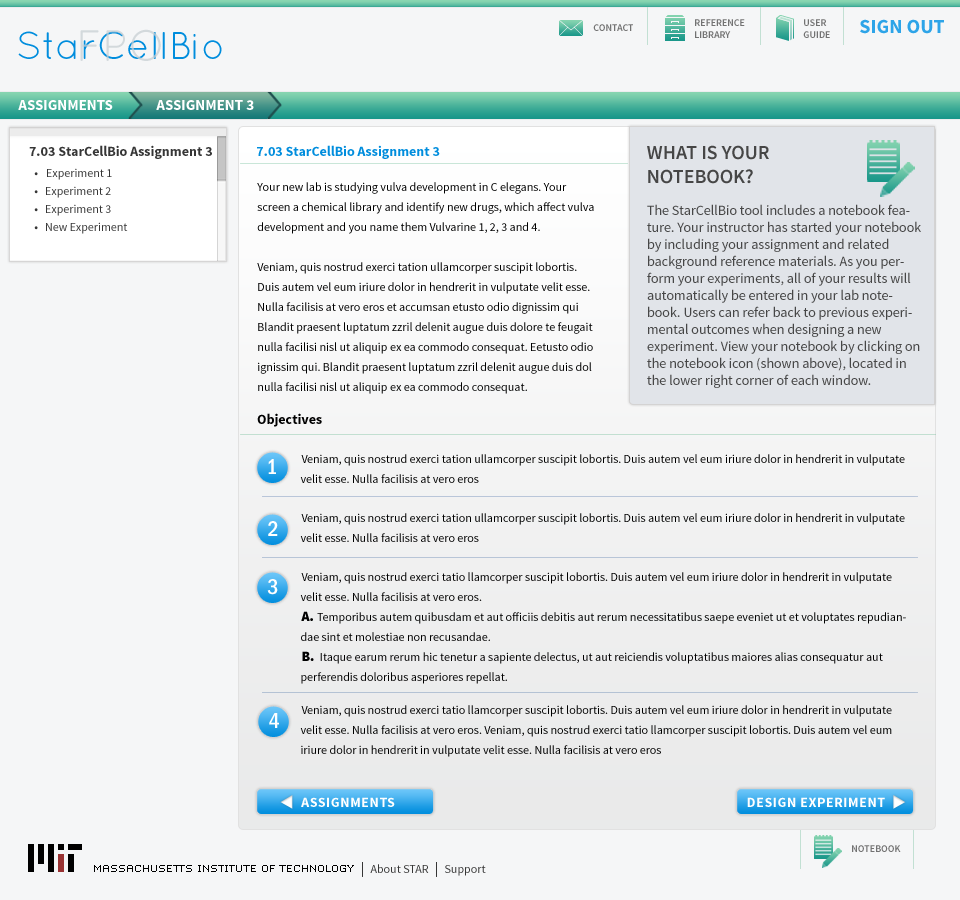
<style>
.page{position:relative;width:960px;height:900px;background:#f5f6f7}
.page>*{position:absolute;margin:0}
.t1{font:43.9px "QuicksandBook-Regular";color:#c7cfd3}
.t2{font:10px "SourceSansPro-Semibold";color:#727272}
.t3{font:20px "SourceSansPro-Bold";color:#2da4e8}
.t4{font:38.5px "QuicksandBook-Regular";color:#008ddd}
.t5{font:15px "SourceSansPro-Bold";color:#ffffff}
.t6{font:14px "SourceSansPro-Bold";color:#363636}
.t7{font:14px "SourceSansPro-Bold";color:#008ddd}
.t8{font:14px "SourceSansPro-Bold";color:#008ddd;text-transform:uppercase}
.t9{font:20px "SourceSansPro-Semibold";color:#464646}
.t10{font:12px/18px "SourceSansPro-Regular";color:#363636}
.t11{font:12px/20px "SourceSansPro-Regular";color:#000000}
.t12{font:14px/17px "SourceSansPro-Regular";color:#464646}
.t13{font:14px "SourceSansPro-Bold";color:#000000}
.t14{font:21.9px "ITCFranklinGothicStd-MdCd";color:#ffffff}
.t15{font:14px/20px "SourceSansPro-Black";color:#000000}
.t16{font:14px "SourceSansPro-Bold";letter-spacing:0.04em;color:#ffffff}
.t17{font:12px "SourceSansPro-Regular";color:#363636}
</style>
<div class="page">
<p class="t1" style="left:80px;top:29px;width:81px;height:32px;opacity:0.75">FPO</p>
<p class="t2" style="left:593px;top:24px;width:40px;height:7px">CONTACT</p>
<p class="t2" style="left:695px;top:19px;width:50px;height:19px">REFERENCE<br>LIBRARY</p>
<p class="t2" style="left:803px;top:19px;width:27px;height:19px">USER<br>GUIDE</p>
<p class="t3" style="left:860px;top:19px;width:84px;height:15px">SIGN OUT</p>
<p class="t4" style="left:18px;top:31px;width:204px;height:28px">StarCellBio</p>
<p class="t5" style="left:18px;top:100px;width:95px;height:10px">ASSIGNMENTS</p>
<p class="t5" style="left:156px;top:100px;width:98px;height:10px">ASSIGNMENT 3</p>
<p class="t6" style="left:29px;top:145px;width:183px;height:14px">7.03 StarCellBio Assignment 3</p>
<p class="t7" style="left:257px;top:145px;width:183px;height:14px"><span class="t8">7.03 </span>StarCellBio<span class="t8"> A</span>ssignment<span class="t8"> 3</span></p>
<p class="t9" style="left:647px;top:145px;width:122px;height:39px">WHAT IS YOUR <br>NOTEBOOK?</p>
<p class="t10" style="left:34px;top:172px;width:4px;height:58px;text-align:right">•<br>•<br>•<br>•</p>
<p class="t10" style="left:46px;top:168px;width:82px;height:66px">Experiment 1<br>Experiment 2<br>Experiment 3<br>New Experiment</p>
<p class="t11" style="left:257px;top:182px;width:337px;height:212px">Your new lab is studying vulva development in C elegans. Your<br>screen a chemical library and identify new drugs, which affect vulva<br>development and you name them Vulvarine 1, 2, 3 and 4.<br><br>Veniam, quis nostrud exerci tation ullamcorper suscipit lobortis.<br>Duis autem vel eum iriure dolor in hendrerit in vulputate velit esse.<br>Nulla facilisis at vero eros et accumsan etusto odio dignissim qui<br>Blandit praesent luptatum zzril delenit augue duis dolore te feugait<br>nulla facilisi nisl ut aliquip ex ea commodo consequat. Eetusto odio<br>ignissim qui. Blandit praesent luptatum zzril delenit augue duis dol<br>nulla facilisi nisl ut aliquip ex ea commodo consequat.</p>
<p class="t12" style="left:647px;top:204px;width:274px;height:184px">The StarCellBio tool includes a notebook feature. Your instructor has started your notebook by including your assignment and related background reference materials. As you perform your experiments, all of your results will automatically be entered in your lab notebook. Users can refer back to previous experimental outcomes when designing a new experiment. View your notebook by clicking on the notebook icon (shown above), located in the lower right corner of each window.</p>
<p class="t13" style="left:257px;top:413px;width:65px;height:14px">Objectives</p>
<p class="t14" style="left:268px;top:459px;width:8px;height:15px">1</p>
<p class="t11" style="left:300px;top:454px;width:605px;height:29px">Veniam, quis nostrud exerci tation ullamcorper suscipit lobortis. Duis autem vel eum iriure dolor in hendrerit in vulputate velit esse. Nulla facilisis at vero eros</p>
<p class="t14" style="left:268px;top:521px;width:10px;height:15px">2</p>
<p class="t11" style="left:300px;top:513px;width:605px;height:29px">Veniam, quis nostrud exerci tation ullamcorper suscipit lobortis. Duis autem vel eum iriure dolor in hendrerit in vulputate velit esse. Nulla facilisis at vero eros</p>
<p class="t14" style="left:267px;top:579px;width:11px;height:16px">3</p>
<p class="t11" style="left:300px;top:572px;width:606px;height:112px">Veniam, quis nostrud exerci tatio llamcorper suscipit lobortis. Duis autem vel eum iriure dolor in hendrerit in vulputate velit esse. Nulla facilisis at vero eros. <br><span class="t15">A. </span>Temporibus autem quibusdam et aut officiis debitis aut rerum necessitatibus saepe eveniet ut et voluptates repudiandae sint et molestiae non recusandae.<br><span class="t15">B. </span> Itaque earum rerum hic tenetur a sapiente delectus, ut aut reiciendis voluptatibus maiores alias consequatur aut perferendis doloribus asperiores repellat.</p>
<p class="t14" style="left:269px;top:713px;width:10px;height:15px">4</p>
<p class="t11" style="left:300px;top:705px;width:592px;height:52px">Veniam, quis nostrud exerci tatio llamcorper suscipit lobortis. Duis autem vel eum iriure dolor in hendrerit in vulputate velit esse. Nulla facilisis at vero eros. Veniam, quis nostrud exerci tatio llamcorper suscipit lobortis. Duis autem vel eum iriure dolor in hendrerit in vulputate velit esse. Nulla facilisis at vero eros</p>
<p class="t16" style="left:301px;top:797px;width:94px;height:10px">ASSIGNMENTS</p>
<p class="t16" style="left:747px;top:797px;width:138px;height:10px">DESIGN EXPERIMENT</p>
<p class="t2" style="left:852px;top:845px;width:49px;height:7px">NOTEBOOK</p>
<p class="t17" style="left:370px;top:864px;width:59px;height:9px">About STAR</p>
<p class="t17" style="left:445px;top:865px;width:41px;height:11px">Support</p>
</div>
